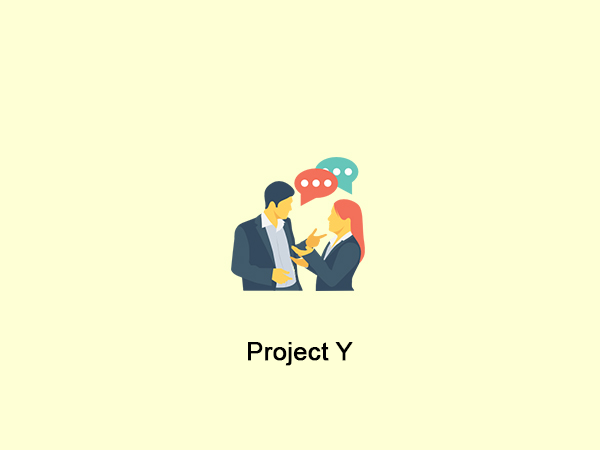
<style>
.page{position:relative;width:600px;height:450px;background:#feffd5}
.page>*{position:absolute;margin:0}
.t1{font:25px "ArialMT";color:#000000;font-weight:bold}
</style>
<div class="page">
<p class="t1" style="left:248px;top:342px;width:105px;height:24px">Project Y</p>
</div>
